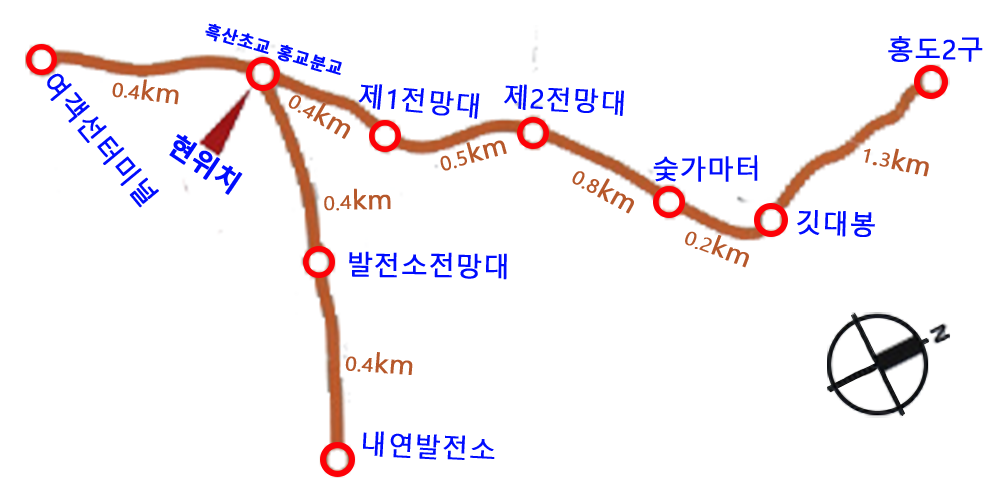
<style>
.page{position:relative;width:1000px;height:500px;background:#ffffff}
.page>*{position:absolute;margin:0}
.t1{font:17px "MalgunGothicBold";color:#000cfe;font-weight:bold}
.t2{font:26.6px "MalgunGothic";color:#000cfe;font-weight:bold}
.t3{font:19px "MalgunGothic";color:#b6582b;font-weight:bold;scale:1.06 1}
.t4{font:26.6px "MalgunGothic";color:#b6582b;font-weight:bold;scale:1.06 1}
.t5{font:26.6px "MalgunGothicBold";color:#000cfe;font-weight:bold}
.t6{font:18.7px "MalgunGothic";color:#b6582b;font-weight:bold;scale:1.06 1}
</style>
<div class="page">
<p class="t1" style="left:205px;top:23px;width:137px;height:52px;rotate:16deg">흑산초교 홍교분교</p>
<p class="t2" style="left:888px;top:36px;width:95px;height:26px">홍도2구</p>
<p class="t2" style="left:47px;top:73px;width:112px;height:135px;rotate:50deg">여객선터미널</p>
<p class="t3" style="left:112px;top:79px;width:67px;height:26px;rotate:8deg">0.4<span class="t4">km</span></p>
<p class="t2" style="left:358px;top:84px;width:122px;height:35px;rotate:5deg">제1전망대</p>
<p class="t2" style="left:504px;top:84px;width:120px;height:32px;rotate:3deg">제2전망대</p>
<p class="t3" style="left:288px;top:95px;width:63px;height:44px;rotate:30deg">0.4<span class="t4">km</span></p>
<p class="t5" style="left:169px;top:134px;width:74px;height:61px;rotate:34deg">현위치</p>
<p class="t3" style="left:440px;top:140px;width:67px;height:31px;rotate:-15deg">0.5<span class="t4">km</span></p>
<p class="t4" style="left:864px;top:148px;width:65px;height:29px;rotate:13deg"><span class="t3">1</span>.<span class="t6">3</span>km</p>
<p class="t2" style="left:653px;top:155px;width:105px;height:27px">숯가마터</p>
<p class="t3" style="left:572px;top:171px;width:62px;height:43px;rotate:29deg">0.8<span class="t4">km</span></p>
<p class="t3" style="left:324px;top:188px;width:67px;height:23px;rotate:-1deg">0.4<span class="t4">km</span></p>
<p class="t2" style="left:797px;top:210px;width:78px;height:27px;rotate:2deg">깃대봉</p>
<p class="t3" style="left:685px;top:231px;width:64px;height:37px;rotate:21deg">0.2<span class="t4">km</span></p>
<p class="t2" style="left:349px;top:251px;width:158px;height:29px;rotate:1deg">발전소전망대</p>
<p class="t3" style="left:345px;top:352px;width:68px;height:23px;rotate:5deg">0.4<span class="t4">km</span></p>
<p class="t2" style="left:363px;top:431px;width:132px;height:29px;rotate:3deg">내연발전소</p>
</div>
